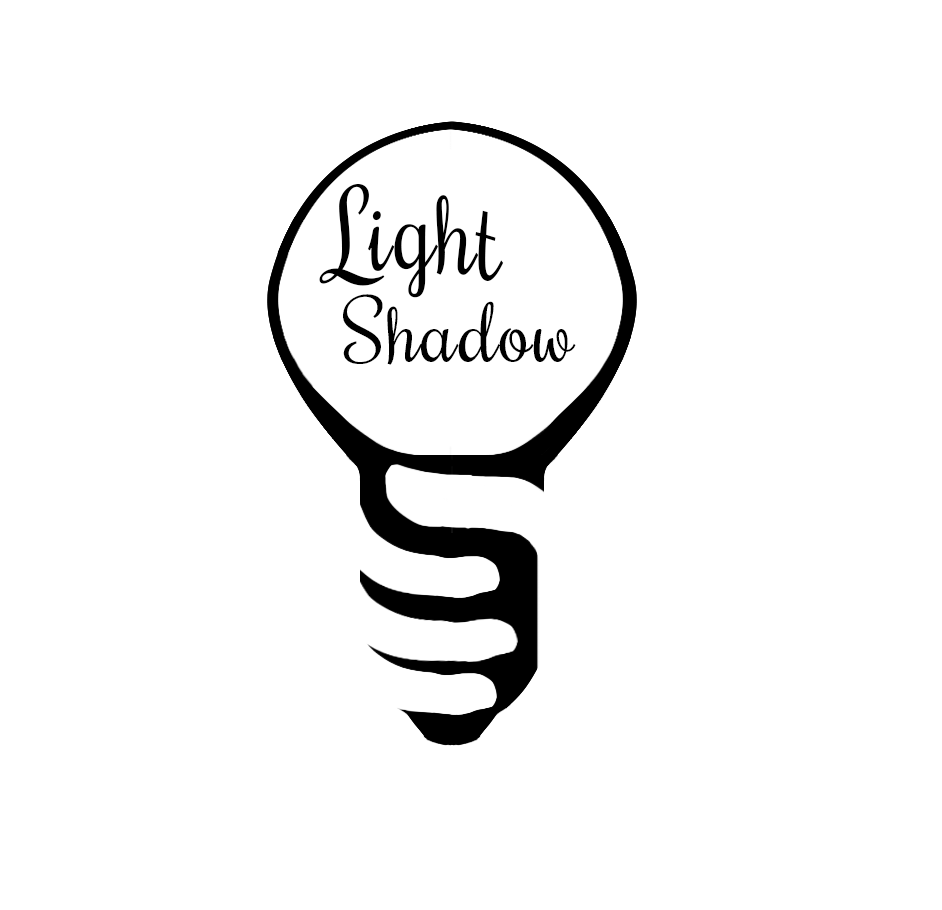
<style>
.page{position:relative;width:942px;height:910px;background:#ffffff}
.page>*{position:absolute;margin:0}
.t1{font:112.3px "Rochester-Regular";letter-spacing:0.025em;color:#000000;scale:0.87 1}
.t2{font:82.6px "Rochester-Regular";letter-spacing:0.025em;color:#000000}
</style>
<div class="page">
<p class="t1" style="left:319px;top:184px;width:185px;height:114px">Light</p>
<p class="t2" style="left:343px;top:294px;width:233px;height:71px">Shadow</p>
</div>
